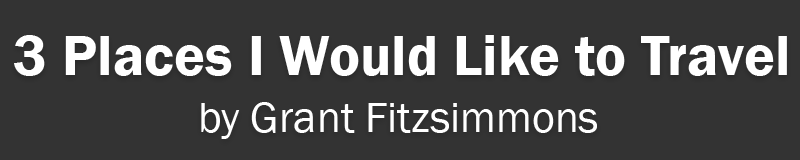
<style>
.page{position:relative;width:800px;height:160px;background:#333333}
.page>*{position:absolute;margin:0}
.t1{font:58.4px "FranklinGothic-Demi";color:#ffffff}
.t2{font:44px "FranklinGothic-Book";color:#ffffff}
</style>
<div class="page">
<p class="t1" style="left:14px;top:35px;width:773px;height:41px">3 Places I Would Like to Travel</p>
<p class="t2" style="left:201px;top:102px;width:396px;height:37px">by Grant Fitzsimmons</p>
</div>
